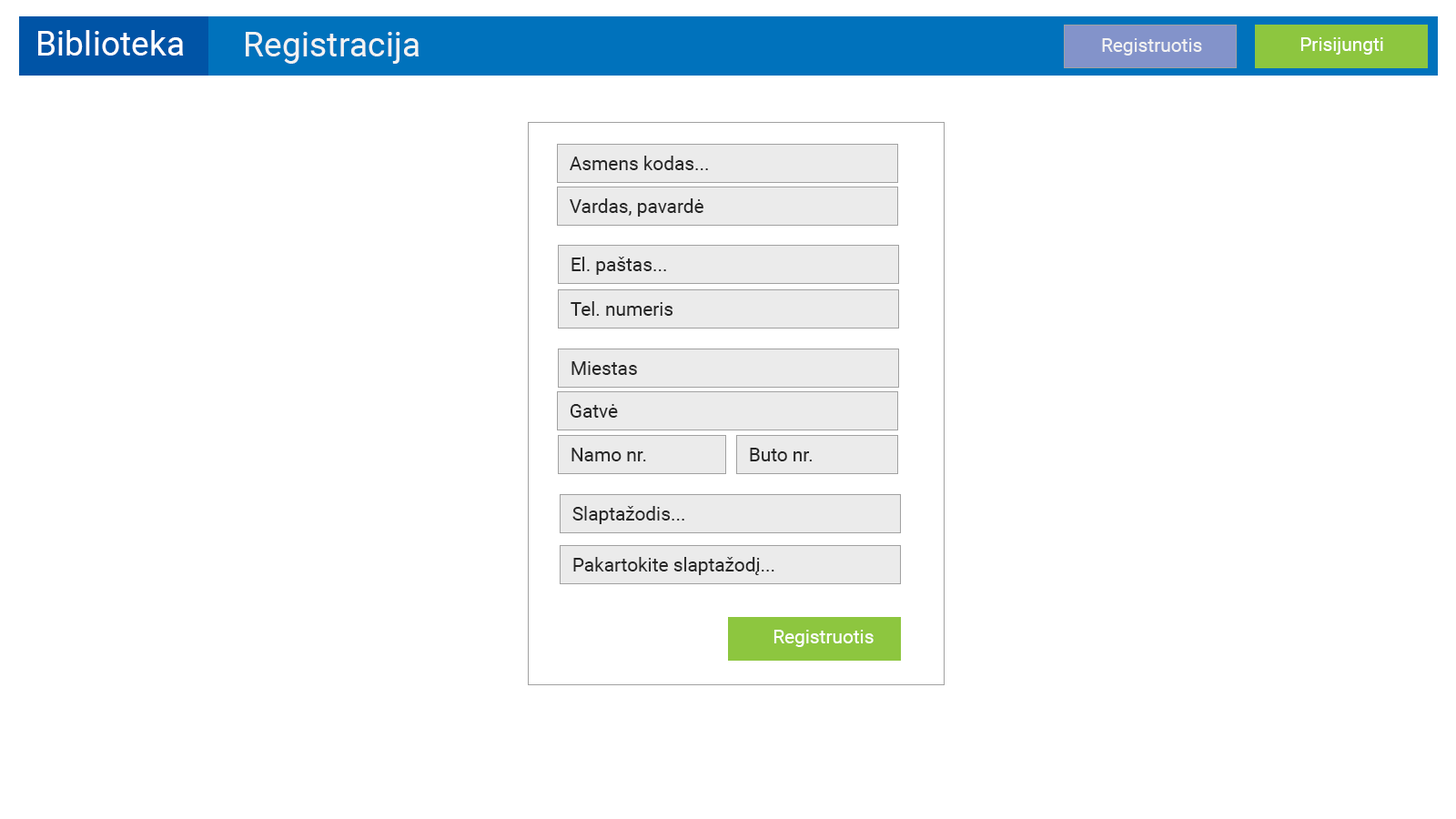
<style>
.page{position:relative;width:1456px;height:819px;background:#ffffff}
.page>*{position:absolute;margin:0}
.t1{font:34.1px "Roboto-Regular";color:#ffffff}
.t2{font:34.1px "Roboto-Regular";color:#f2f2f2}
.t3{font:19px "Roboto-Regular";color:#f2f2f2}
.t4{font:19px "Roboto-Regular";color:#ffffff}
.t5{font:19px "Roboto-Regular";color:#262626}
</style>
<div class="page">
<p class="t1" style="left:38px;top:30px;width:146px;height:26px">Biblioteka</p>
<p class="t2" style="left:246px;top:32px;width:174px;height:32px">Registracija</p>
<p class="t3" style="left:1102px;top:38px;width:100px;height:18px">Registruotis</p>
<p class="t4" style="left:1300px;top:37px;width:83px;height:18px">Prisijungti</p>
<p class="t5" style="left:570px;top:156px;width:138px;height:14px">Asmens kodas...</p>
<p class="t5" style="left:570px;top:198px;width:133px;height:19px">Vardas, pavardė</p>
<p class="t5" style="left:571px;top:257px;width:95px;height:18px">El. paštas...</p>
<p class="t5" style="left:571px;top:301px;width:102px;height:15px">Tel. numeris</p>
<p class="t5" style="left:571px;top:361px;width:66px;height:14px">Miestas</p>
<p class="t5" style="left:570px;top:404px;width:48px;height:14px">Gatvė</p>
<p class="t5" style="left:571px;top:448px;width:75px;height:13px">Namo nr.</p>
<p class="t5" style="left:750px;top:448px;width:63px;height:13px">Buto nr.</p>
<p class="t5" style="left:572px;top:506px;width:112px;height:18px">Slaptažodis...</p>
<p class="t5" style="left:573px;top:557px;width:201px;height:18px">Pakartokite slaptažodį...</p>
<p class="t4" style="left:773px;top:630px;width:101px;height:17px">Registruotis</p>
</div>
